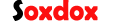
<style>
.page{position:relative;width:121px;height:23px;background:#ffffff}
.page>*{position:absolute;margin:0}
.t1{font:30px "BerlinSansFBDemi-Bold";color:#fc1010;scale:0.94 1}
.t2{font:30px "BerlinSansFBDemi-Bold";color:#000000;scale:0.94 1}
</style>
<div class="page">
<p class="t1" style="left:12px;top:0px;width:86px;height:21px"><span class="t2">S</span>oxdox</p>
</div>
